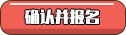
<style>
.page{position:relative;width:126px;height:35px;background:#f25f55}
.page>*{position:absolute;margin:0}
.t1{font:15px "ZhenyanGB-Regular";color:#ffffff}
</style>
<div class="page">
<p class="t1" style="left:24px;top:9px;width:75px;height:15px">确认并报名</p>
</div>
